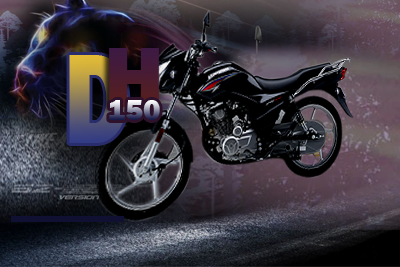
<style>
.page{position:relative;width:400px;height:267px}
.page>*{position:absolute;margin:0}
.t1{font:132.4px "FranklinGothic-Heavy";scale:0.73 1}
.t2{font:30px "FranklinGothic-Heavy"}
</style>
<div class="page">
<p class="t1" style="left:69px;top:55px;width:59px;height:88px">D</p>
<p class="t2" style="left:109px;top:100px;width:51px;height:20px">150</p>
</div>
